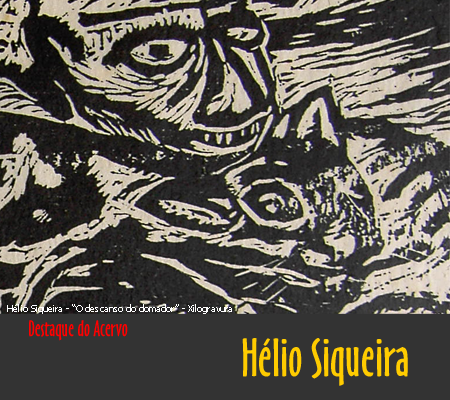
<style>
.page{position:relative;width:450px;height:400px}
.page>*{position:absolute;margin:0}
.t1{font:9px "Tahoma";color:#ffffff}
.t2{font:20.8px "OzHandicraftBT-Roman";color:#ff0000}
.t3{font:50px "OzHandicraftBT-Roman";color:#ffcc00}
</style>
<div class="page">
<p class="t1" style="left:7px;top:304px;width:225px;height:10px">Hélio Siqueira - “O descanso do domador” - Xilogravura</p>
<p class="t2" style="left:29px;top:320px;width:99px;height:21px">Destaque do Acervo</p>
<p class="t3" style="left:242px;top:338px;width:166px;height:48px">Hélio Siqueira</p>
</div>
